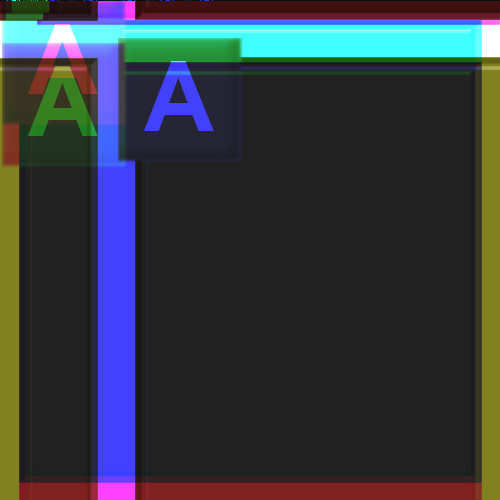
<style>
.page{position:relative;width:500px;height:500px;background:#212121}
.page>*{position:absolute;margin:0}
.t1{font:96.6px "Arial-BoldMT"}
</style>
<div class="page">
<p class="t1" style="left:28px;top:23px;width:70px;height:70px">A</p>
</div>
